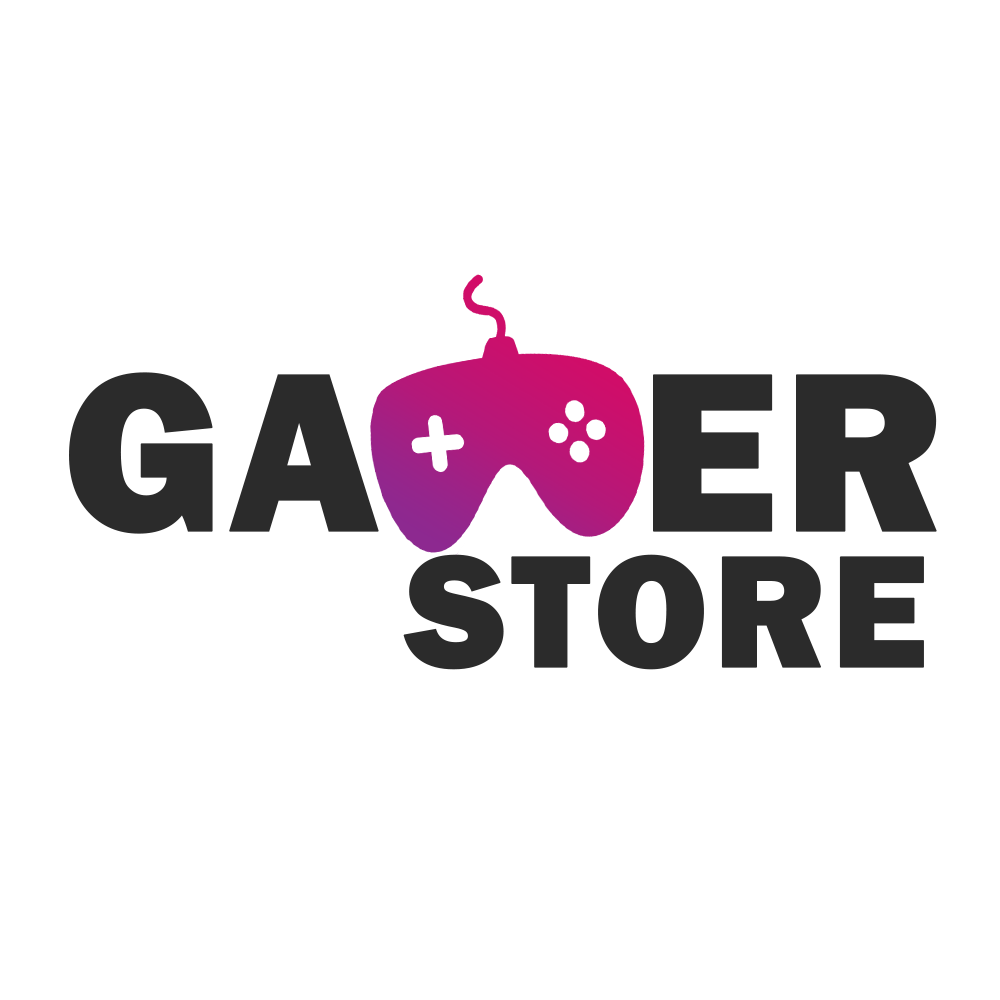
<style>
.page{position:relative;width:1000px;height:1000px;background:#ffffff}
.page>*{position:absolute;margin:0}
.t1{font:234.4px "FranklinGothic-Heavy";color:#2b2b2b;font-weight:bold}
.t2{font:165.2px "FranklinGothic-Heavy";color:#2b2b2b;font-weight:bold}
</style>
<div class="page">
<p class="t1" style="left:69px;top:372px;width:310px;height:162px">GA</p>
<p class="t1" style="left:653px;top:374px;width:284px;height:158px">ER</p>
<p class="t2" style="left:403px;top:554px;width:521px;height:116px">STORE</p>
</div>
